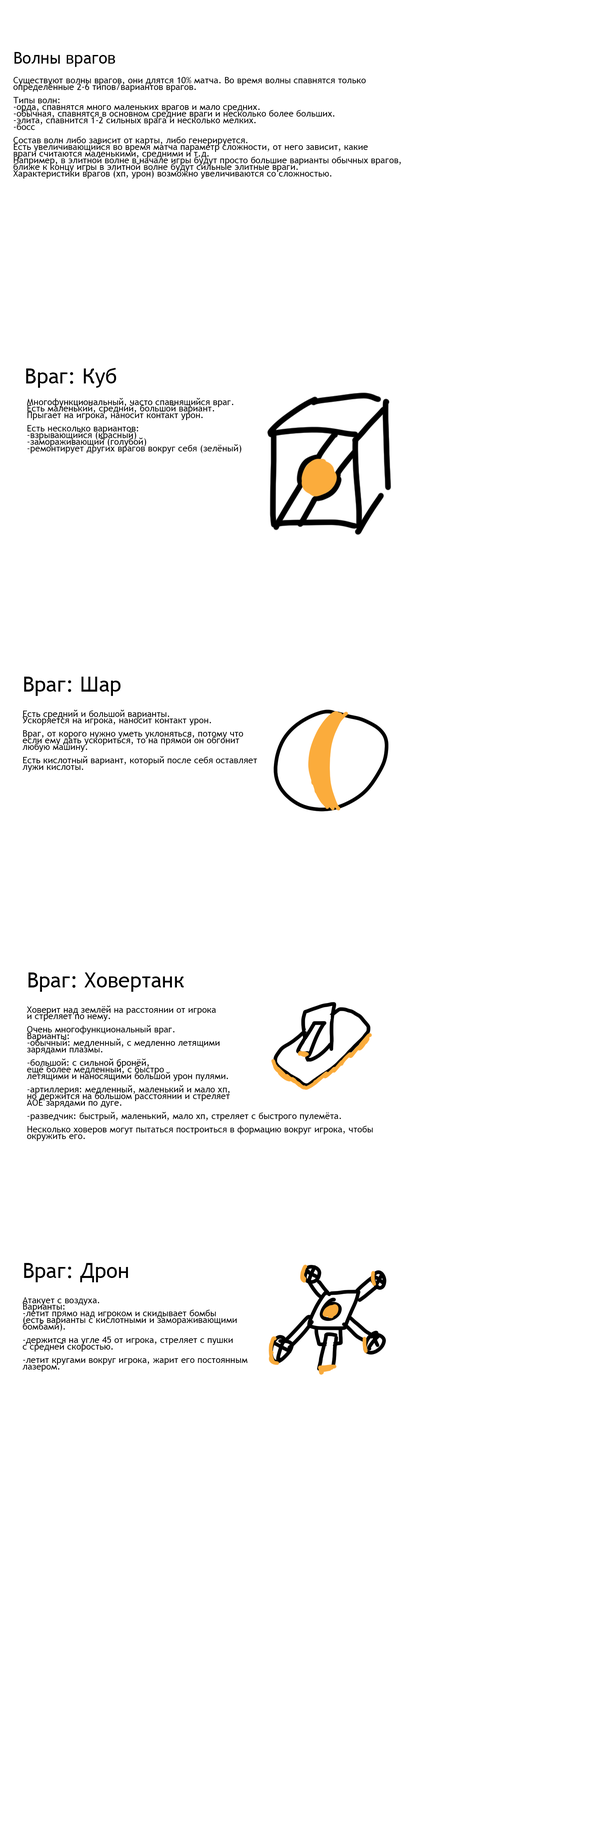
<style>
.page{position:relative;width:597px;height:1823px;background:#ffffff}
.page>*{position:absolute;margin:0}
.t1{font:9px/6.7px "TrebuchetMS";color:#000000}
.t2{font:16.3px/6.7px "TrebuchetMS";color:#000000}
.t3{font:21px "TrebuchetMS";color:#000000}
</style>
<div class="page">
<p class="t1" style="left:13px;top:52px;width:388px;height:127px"><span class="t2">Волны врагов<br><br></span><br>Существуют волны врагов, они длятся 10% матча. Во время волны спавнятся только<br>определённые 2-6 типов/вариантов врагов.<br><br>Типы волн:<br>-орда, спавнятся много маленьких врагов и мало средних.<br>-обычная, спавнятся в основном средние враги и несколько более больших.<br>-элита, спавнится 1-2 сильных врага и несколько мелких.<br>-босс<br><br>Состав волн либо зависит от карты, либо генерируется.<br>Есть увеличивающийся во время матча параметр сложности, от него зависит, какие<br>враги считаются маленькими, средними и т.д.<br>Например, в элитной волне в начале игры будут просто большие варианты обычных врагов,<br>ближе к концу игры в элитной волне будут сильные элитные враги.<br>Характеристики врагов (хп, урон) возможно увеличиваются со сложностью.</p>
<p class="t3" style="left:26px;top:368px;width:90px;height:20px">Враг: Куб</p>
<p class="t1" style="left:27px;top:398px;width:215px;height:55px">Многофункциональный, часто спавнящийся враг.<br>Есть маленький, средний, большой вариант.<br>Прыгает на игрока, наносит контакт урон.<br><br>Есть несколько вариантов:<br>-взрывающийся (красный)<br>-замораживающий (голубой)<br>-ремонтирует других врагов вокруг себя (зелёный)</p>
<p class="t3" style="left:24px;top:677px;width:97px;height:19px">Враг: Шар</p>
<p class="t1" style="left:22px;top:710px;width:235px;height:62px">Есть средний и большой варианты.<br>Ускоряется на игрока, наносит контакт урон.<br><br>Враг, от корого нужно уметь уклоняться, потому что<br>если ему дать ускориться, то на прямой он обгонит<br>любую машину.<br><br>Есть кислотный вариант, который после себя оставляет<br>лужи кислоты.</p>
<p class="t3" style="left:28px;top:973px;width:156px;height:19px">Враг: Ховертанк</p>
<p class="t1" style="left:27px;top:1006px;width:346px;height:135px">Ховерит над землёй на расстоянии от игрока<br>и стреляет по нему.<br><br>Очень многофункциональный враг.<br>Варианты:<br>-обычный: медленный, с медленно летящими<br>зарядами плазмы.<br><br>-большой: с сильной бронёй,<br>ещё более медленный, с быстро<br>летящими и наносящими большой урон пулями.<br><br>-артиллерия: медленный, маленький и мало хп,<br>но держится на большом расстоянии и стреляет<br>АОЕ зарядами по дуге.<br><br>-разведчик: быстрый, маленький, мало хп, стреляет с быстрого пулемёта.<br><br>Несколько ховеров могут пытаться построиться в формацию вокруг игрока, чтобы<br>окружить его.</p>
<p class="t3" style="left:24px;top:1263px;width:104px;height:20px">Враг: Дрон</p>
<p class="t1" style="left:22px;top:1297px;width:226px;height:75px">Атакует с воздуха.<br>Варианты:<br>-летит прямо над игроком и скидывает бомбы<br>(есть варианты с кислотными и замораживающими<br>бомбами).<br><br>-держится на угле 45 от игрока, стреляет с пушки<br>с средней скоростью.<br><br>-летит кругами вокруг игрока, жарит его постоянным<br>лазером.</p>
</div>
